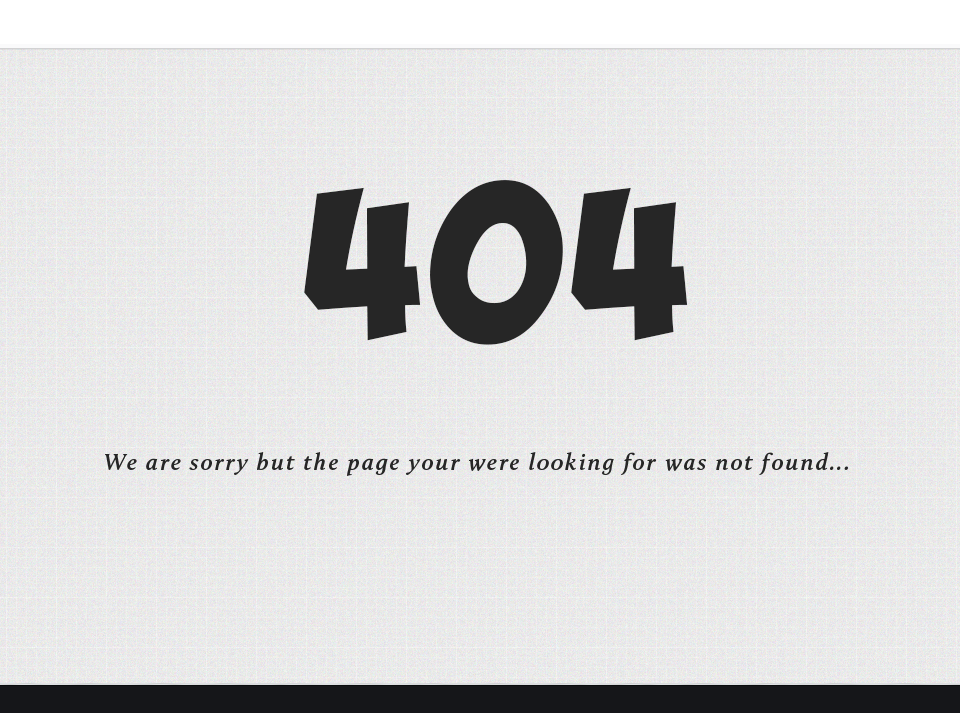
<style>
.page{position:relative;width:960px;height:713px}
.page>*{position:absolute;margin:0}
.t1{font:150px "ObelixPro";letter-spacing:0.08em;color:#262626}
.t2{font:24px "Calluna-SemiboldIt";letter-spacing:0.08em;color:#262626}
</style>
<div class="page">
<p class="t1" style="left:304px;top:180px;width:384px;height:165px">404</p>
<p class="t2" style="left:105px;top:452px;width:743px;height:24px">We are sorry but the page your were looking for was not found...</p>
</div>
